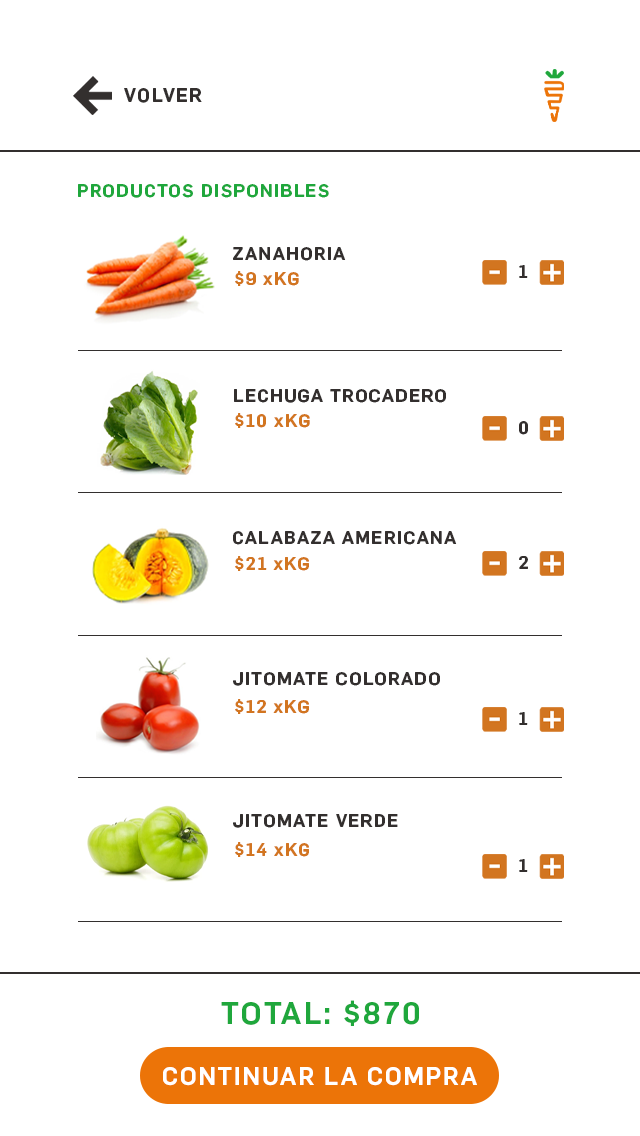
<style>
.page{position:relative;width:640px;height:1136px;background:#ffffff}
.page>*{position:absolute;margin:0}
.t1{font:19.1px "Flama-Medium";letter-spacing:0.075em;color:#332f2e}
.t2{font:18px "Flama-Medium";letter-spacing:0.075em;color:#1fa73c}
.t3{font:18px "Flama-Medium";letter-spacing:0.075em;color:#332f2e}
.t4{font:18px "Flama-Medium";letter-spacing:0.075em;color:#d27520}
.t5{font:30.4px "Flama-Medium";letter-spacing:0.075em;color:#1fa73c}
</style>
<div class="page">
<p class="t1" style="left:124px;top:88px;width:78px;height:15px">VOLVER</p>
<p class="t2" style="left:78px;top:184px;width:251px;height:14px">PRODUCTOS DISPONIBLES</p>
<p class="t3" style="left:233px;top:247px;width:113px;height:14px">ZANAHORIA</p>
<p class="t3" style="left:519px;top:265px;width:9px;height:13px">1</p>
<p class="t4" style="left:235px;top:271px;width:64px;height:15px">$9 xKG</p>
<p class="t3" style="left:234px;top:389px;width:212px;height:14px">LECHUGA TROCADERO</p>
<p class="t4" style="left:235px;top:413px;width:75px;height:15px">$10 xKG</p>
<p class="t3" style="left:519px;top:421px;width:9px;height:14px">0</p>
<p class="t3" style="left:233px;top:531px;width:224px;height:14px">CALABAZA AMERICANA</p>
<p class="t4" style="left:235px;top:556px;width:74px;height:15px">$21 xKG</p>
<p class="t3" style="left:519px;top:556px;width:9px;height:13px">2</p>
<p class="t3" style="left:233px;top:672px;width:207px;height:14px">JITOMATE COLORADO</p>
<p class="t4" style="left:235px;top:699px;width:74px;height:15px">$12 xKG</p>
<p class="t3" style="left:519px;top:712px;width:9px;height:13px">1</p>
<p class="t3" style="left:233px;top:814px;width:165px;height:14px">JITOMATE VERDE</p>
<p class="t4" style="left:235px;top:842px;width:74px;height:15px">$14 xKG</p>
<p class="t3" style="left:519px;top:859px;width:9px;height:13px">1</p>
<p class="t5" style="left:221px;top:1000px;width:198px;height:26px">TOTAL: $870</p>
</div>
